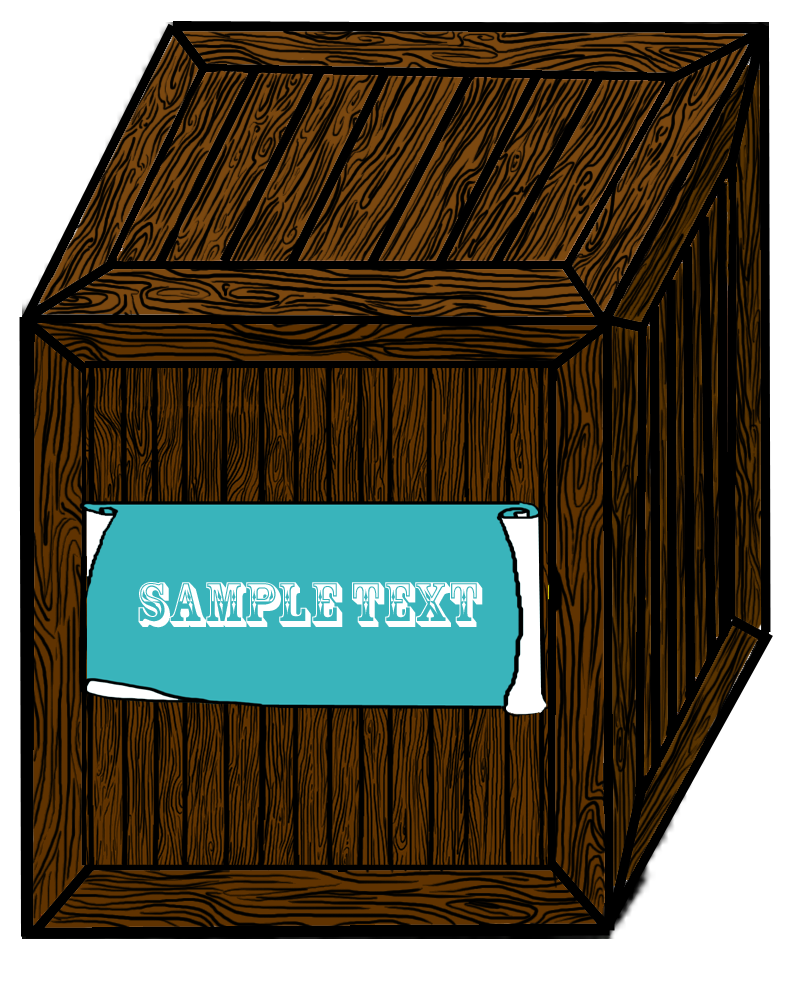
<style>
.page{position:relative;width:801px;height:984px}
.page>*{position:absolute;margin:0}
.t1{font:59.8px "RosewoodStd-Regular";color:#ffffff}
</style>
<div class="page">
<p class="t1" style="left:138px;top:582px;width:345px;height:46px">SAMPLE TEXT</p>
</div>
